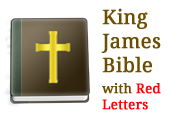
<style>
.page{position:relative;width:180px;height:120px;background:#ffffff}
.page>*{position:absolute;margin:0}
.t1{font:20px "DroidSerif";letter-spacing:-0.005em;color:#6d4d00;font-weight:bold}
.t2{font:13.3px "DroidSerif";letter-spacing:-0.005em;color:#6d4d00;font-weight:bold}
.t3{font:13.3px "DroidSerif";letter-spacing:-0.005em;color:#ff0000;font-weight:bold}
</style>
<div class="page">
<p class="t1" style="left:101px;top:8px;width:60px;height:102px">King James Bible<br><span class="t2">with </span><span class="t3">Red Letters</span></p>
</div>
